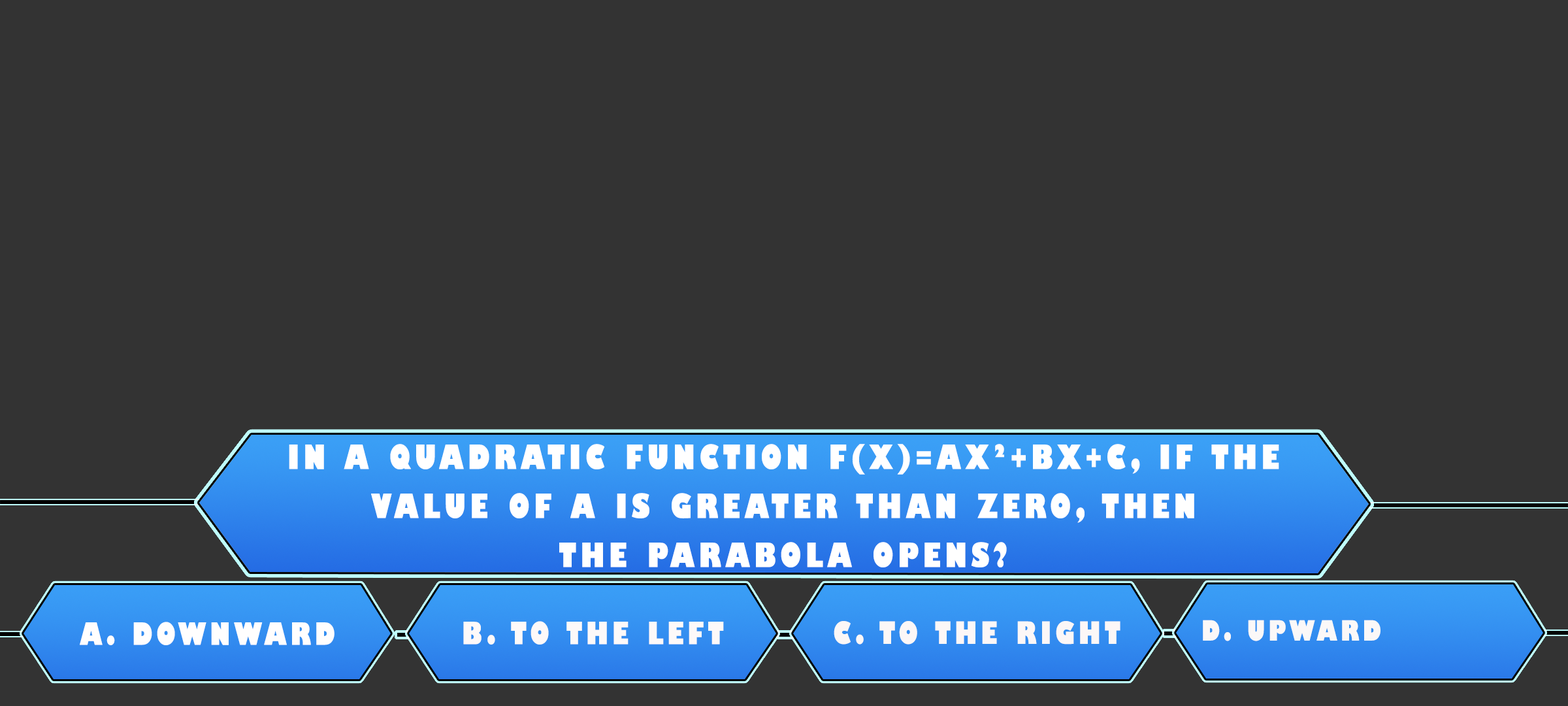
<style>
.page{position:relative;width:1568px;height:706px;background:#333333}
.page>*{position:absolute;margin:0}
.t1{font:32.7px/49px "GillSans-UltraBoldCondensed";letter-spacing:0.115em;color:#ffffff;text-transform:uppercase;scale:1.12 1}
.t2{font:29.9px "GillSans-UltraBoldCondensed";letter-spacing:0.115em;color:#fffefe;text-transform:uppercase;scale:1.12 1}
.t3{font:29.9px "GillSans-UltraBoldCondensed";letter-spacing:0.115em;color:#fdf9f9;text-transform:uppercase;scale:1.12 1}
.t4{font:29.9px "GillSans-UltraBoldCondensed";letter-spacing:0.115em;color:#fcf7f7;text-transform:uppercase;scale:1.12 1}
.t5{font:27.2px "GillSans-UltraBoldCondensed";letter-spacing:0.115em;color:#fbf8f8;text-transform:uppercase;scale:1.12 1}
</style>
<div class="page">
<p class="t1" style="left:289px;top:444px;width:990px;height:123px;text-align:center">In a quadratic function f(x)=ax²+bx+c, if the<br>value of a is greater than zero, then<br>the parabola opens?</p>
<p class="t2" style="left:80px;top:621px;width:255px;height:24px">a. downward</p>
<p class="t3" style="left:463px;top:621px;width:261px;height:23px">b. to the left</p>
<p class="t4" style="left:834px;top:621px;width:286px;height:23px">c. to the right</p>
<p class="t5" style="left:1203px;top:619px;width:177px;height:22px">d. upward</p>
</div>
